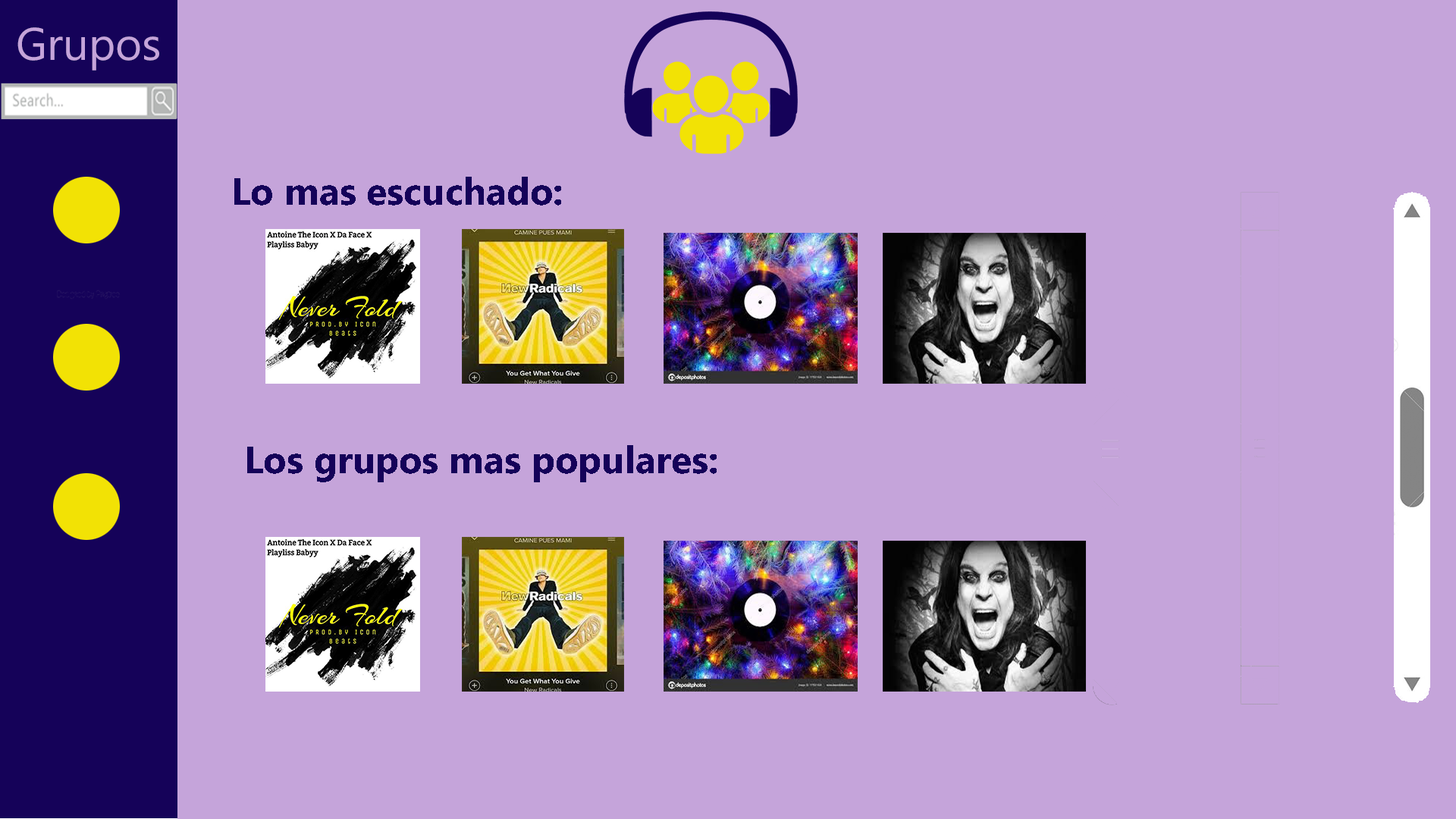
<style>
.page{position:relative;width:1456px;height:819px;background:#c5a4da}
.page>*{position:absolute;margin:0}
.t1{font:45.5px "MicrosoftPhagsPa";color:#c5a4da}
.t2{font:37.9px "MicrosoftPhagsPa-Bold";color:#150259}
</style>
<div class="page">
<p class="t1" style="left:17px;top:27px;width:142px;height:44px">Grupos</p>
<p class="t2" style="left:234px;top:177px;width:327px;height:29px">Lo mas escuchado:</p>
<p class="t2" style="left:247px;top:445px;width:470px;height:37px">Los grupos mas populares:</p>
</div>
